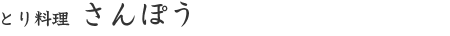
<style>
.page{position:relative;width:450px;height:36px;background:#ffffff}
.page>*{position:absolute;margin:0}
.t1{font:18px "UtrilloPro-DB";color:#333333}
.t2{font:30px "UtrilloPro-DB";color:#333333}
</style>
<div class="page">
<p class="t1" style="left:2px;top:1px;width:187px;height:26px">とり料理 <span class="t2">さんぽう</span></p>
</div>
